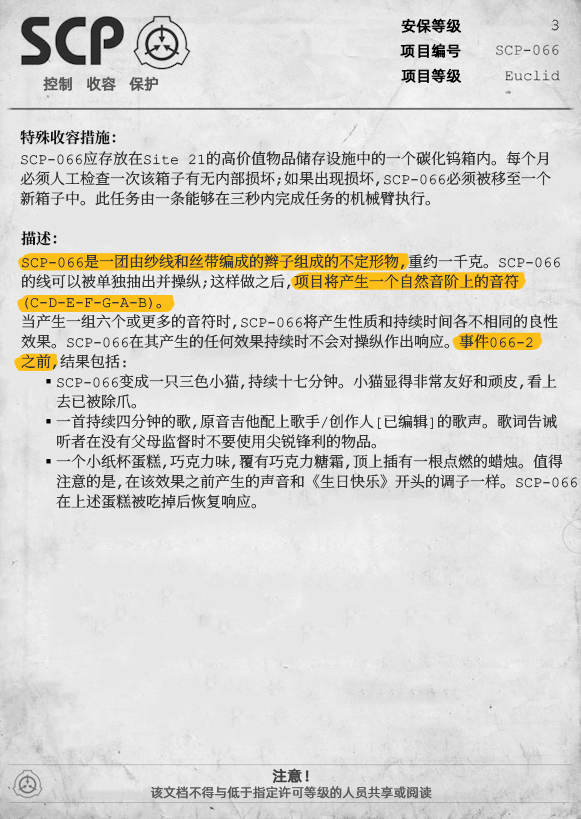
<style>
.page{position:relative;width:581px;height:819px}
.page>*{position:absolute;margin:0}
.t1{font:15px "AlibabaPuHuiTiR";color:#000000;font-weight:bold}
.t2{font:15px "AlibabaPuHuiTiR";color:#5a5958;font-weight:bold}
.t3{font:15px "ContainmentBreach-Bold";color:#121212}
.t4{font:15px/20px "ContainmentBreach-Regular";color:#353535}
.t5{font:15px/20px "ContainmentBreach-Regular";color:#000000}
.t6{font:15px "AlibabaPuHuiTiR";color:#414141;font-weight:bold}
.t7{font:13px "AlibabaPuHuiTiR";color:#575757}
</style>
<div class="page">
<p class="t1" style="left:401px;top:18px;width:61px;height:15px">安保等级</p>
<p class="t1" style="left:400px;top:43px;width:61px;height:15px">项目编号</p>
<p class="t2" style="left:43px;top:76px;width:115px;height:15px">控制   收容   保护</p>
<p class="t1" style="left:401px;top:68px;width:61px;height:15px">项目等级</p>
<p class="t3" style="left:20px;top:130px;width:96px;height:15px">特殊收容措施：</p>
<p class="t4" style="left:20px;top:151px;width:531px;height:55px">SCP-066应存放在Site 21的高价值物品储存设施中的一个碳化钨箱内。每个月<br>必须人工检查一次该箱子有无内部损坏；如果出现损坏，SCP-066必须被移至一个<br>新箱子中。此任务由一条能够在三秒内完成任务的机械臂执行。</p>
<p class="t3" style="left:21px;top:231px;width:36px;height:15px">描述：</p>
<p class="t4" style="left:21px;top:254px;width:556px;height:255px">SCP-066是一团由纱线和丝带编成的辫子组成的不定形物，重约一千克。SCP-066<br>的线可以被单独抽出并操纵；这样做之后，项目将产生一个自然音阶上的音符<br>（C-D-E-F-G-A-B）。<br>当产生一组六个或更多的音符时，SCP-066将产生性质和持续时间各不相同的良性<br>效果。SCP-066在其产生的任何效果持续时不会对操纵作出响应。事件066-2<br>之前，结果包括：<br><span class="t5">▪</span>SCP-066变成一只三色小猫，持续十七分钟。小猫显得非常友好和顽皮，看上<br>去已被除爪。<br><span class="t5">▪</span>一首持续四分钟的歌，原音吉他配上歌手/创作人[已编辑]的歌声。歌词告诫<br>听者在没有父母监督时不要使用尖锐锋利的物品。<br><span class="t5">▪</span>一个小纸杯蛋糕，巧克力味，覆有巧克力糖霜，顶上插有一根点燃的蜡烛。值得<br>注意的是，在该效果之前产生的声音和《生日快乐》开头的调子一样。SCP-066<br>在上述蛋糕被吃掉后恢复响应。</p>
<p class="t6" style="left:272px;top:768px;width:37px;height:15px">注意！</p>
<p class="t7" style="left:151px;top:786px;width:281px;height:13px">该文档不得与低于指定许可等级的人员共享或阅读</p>
</div>
